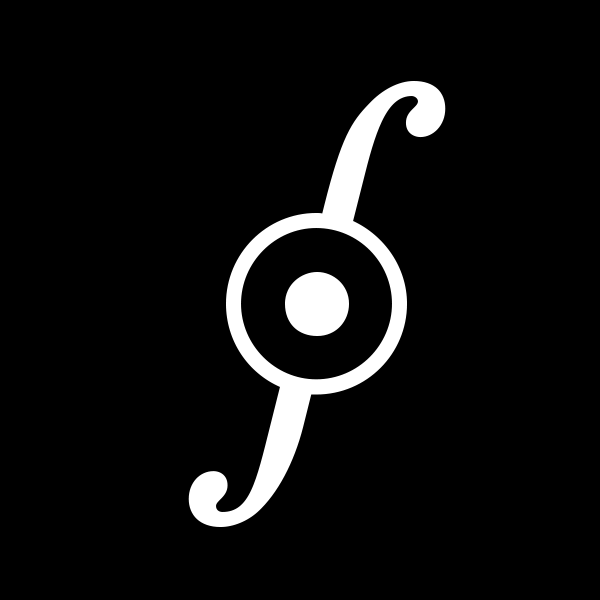
<style>
.page{position:relative;width:600px;height:600px;background:#000000}
.page>*{position:absolute;margin:0}
.t1{font:503.8px "STIXIntegralsSm-Regular";color:#ffffff}
</style>
<div class="page">
<p class="t1" style="left:188px;top:81px;width:258px;height:446px">⨕</p>
</div>
